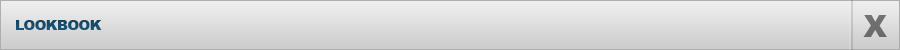
<style>
.page{position:relative;width:900px;height:50px}
.page>*{position:absolute;margin:0}
.t1{font:30px "Arial-Black";letter-spacing:-0.035em;color:#6e6e6e}
.t2{font:14px "Arial-Black";letter-spacing:-0.035em;color:#194d6c}
</style>
<div class="page">
<p class="t1" style="left:863px;top:15px;width:24px;height:22px">X</p>
<p class="t2" style="left:16px;top:20px;width:86px;height:10px">LOOKBOOK</p>
</div>
